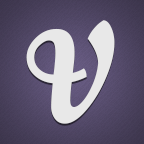
<style>
.page{position:relative;width:144px;height:144px}
.page>*{position:absolute;margin:0}
.t1{font:130.5px "OleoScriptSwashCaps-Regular";color:#e8e8e8;scale:0.93 1}
</style>
<div class="page">
<p class="t1" style="left:26px;top:20px;width:89px;height:104px">V</p>
</div>
